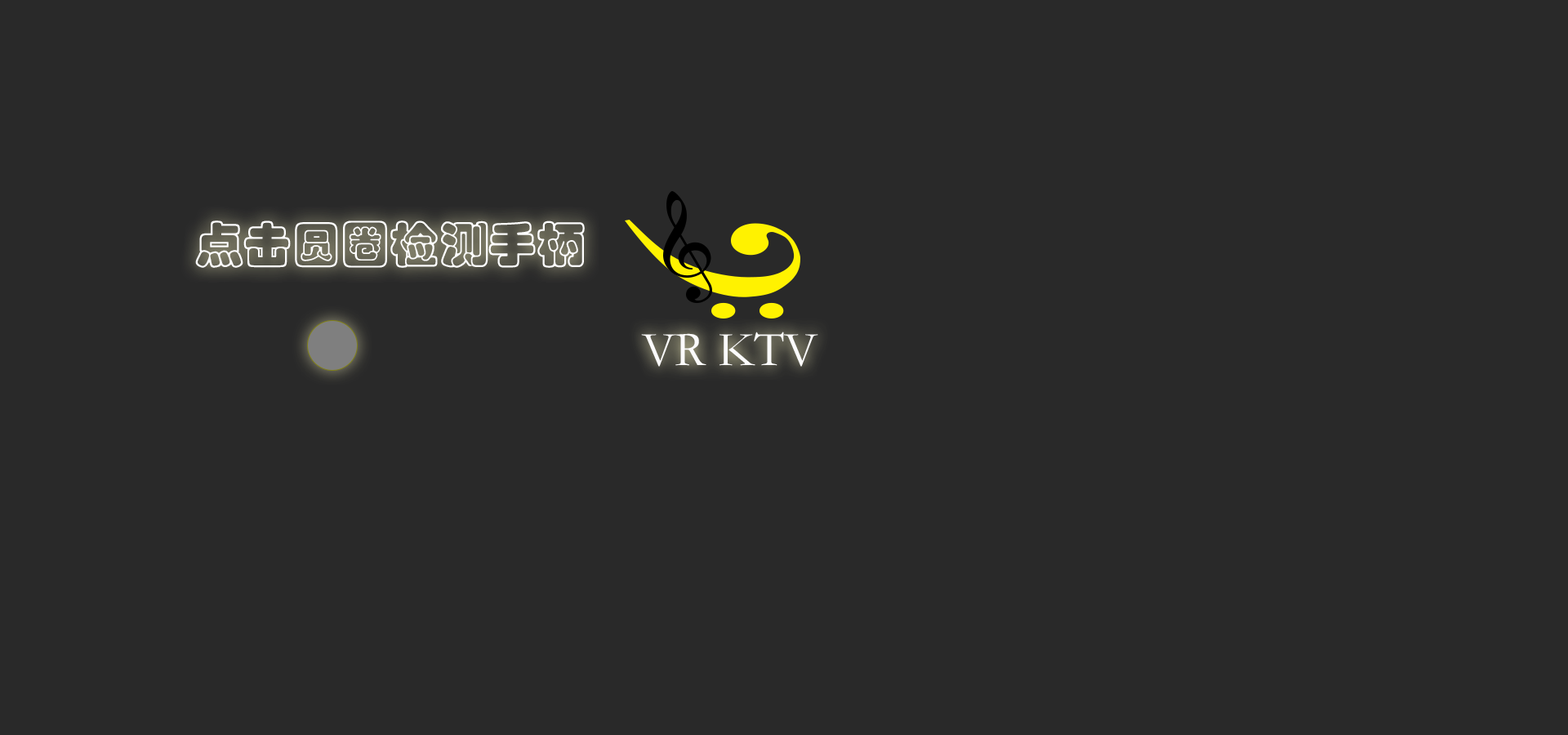
<style>
.page{position:relative;width:1568px;height:735px;background:#292929}
.page>*{position:absolute;margin:0}
.t1{font:49px "STCaiyun";color:#ffffff}
</style>
<div class="page">
<p class="t1" style="left:195px;top:220px;width:390px;height:48px">点击圆圈检测手柄</p>
</div>
